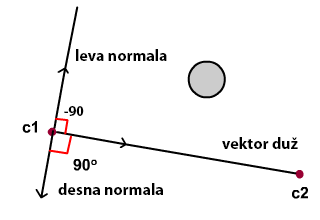
<style>
.page{position:relative;width:320px;height:220px;background:#ffffff}
.page>*{position:absolute;margin:0}
.t1{font:16px "MyriadPro-Bold";color:#000000}
.t2{font:14px "MyriadPro-Bold";color:#000000}
</style>
<div class="page">
<p class="t1" style="left:76px;top:49px;width:91px;height:12px">leva normala</p>
<p class="t2" style="left:64px;top:106px;width:20px;height:10px">-90</p>
<p class="t1" style="left:222px;top:137px;width:76px;height:12px">vektor duž</p>
<p class="t1" style="left:58px;top:183px;width:105px;height:12px">desna normala</p>
</div>
